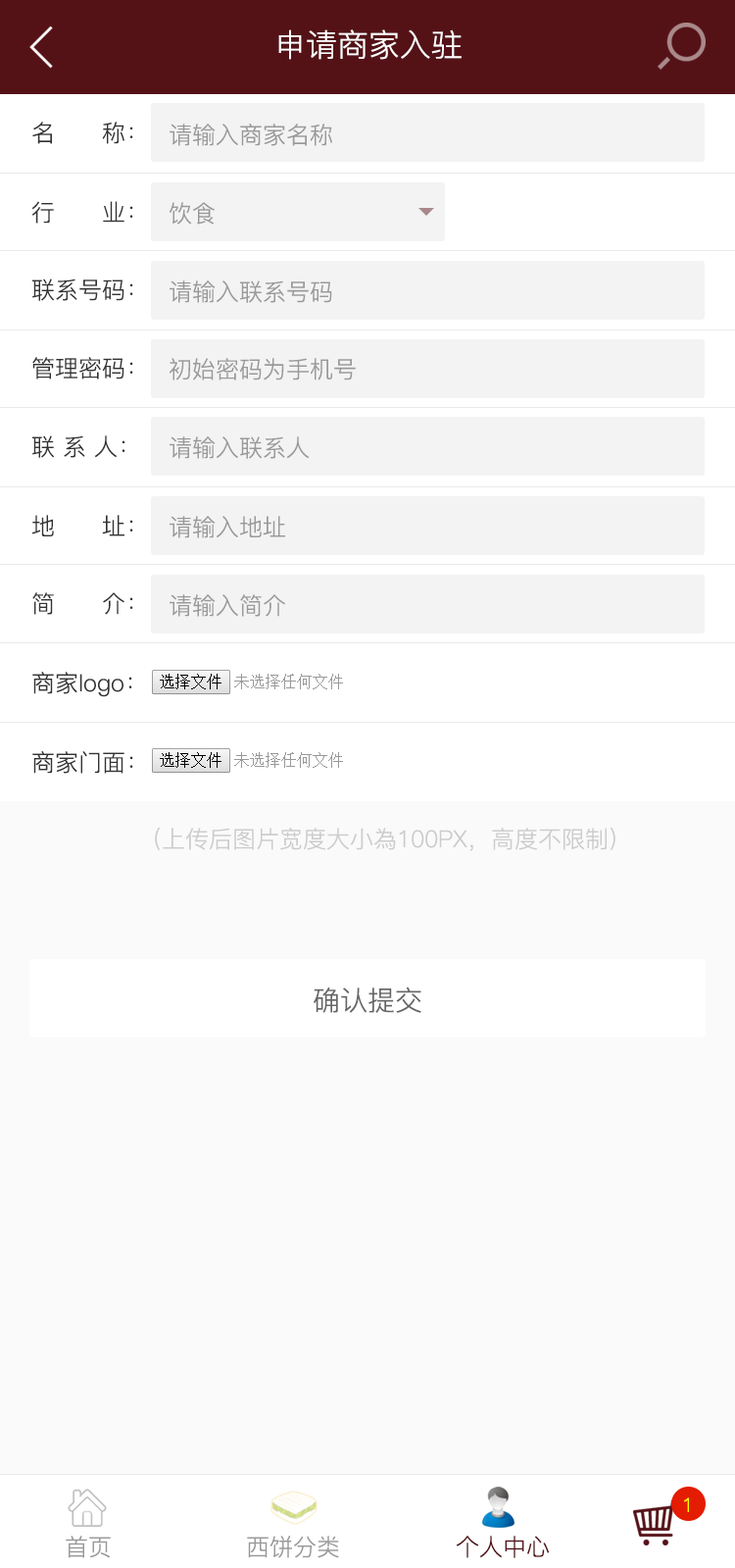
<style>
.page{position:relative;width:735px;height:1568px;background:#fafafa}
.page>*{position:absolute;margin:0}
.t1{font:31.4px "PingFang-SC-Regular";color:#ffffff}
.t2{font:23.5px "PingFang-SC-Regular";color:#333333}
.t3{font:23.5px "PingFang-SC-Regular";color:#999999}
.t4{font:23.5px "PingFang-SC-Regular";color:#cccccc}
.t5{font:27.5px "PingFang-SC-Regular";color:#666666}
.t6{font:19.6px "PingFang-SC-Regular";color:#ffff00}
.t7{font:23.5px "PingFang-SC-Regular";color:#541217}
</style>
<div class="page">
<p class="t1" style="left:278px;top:29px;width:184px;height:31px">申请商家入驻</p>
<p class="t2" style="left:32px;top:122px;width:101px;height:22px">名      称：</p>
<p class="t3" style="left:170px;top:124px;width:162px;height:22px">请输入商家名称</p>
<p class="t2" style="left:32px;top:201px;width:101px;height:23px">行      业：</p>
<p class="t3" style="left:169px;top:202px;width:46px;height:23px">饮食</p>
<p class="t2" style="left:32px;top:278px;width:101px;height:23px">联系号码：</p>
<p class="t3" style="left:170px;top:280px;width:162px;height:23px">请输入联系号码</p>
<p class="t2" style="left:32px;top:357px;width:101px;height:22px">管理密码：</p>
<p class="t3" style="left:169px;top:358px;width:187px;height:22px">初始密码为手机号</p>
<p class="t2" style="left:32px;top:435px;width:94px;height:23px">联 系 人：</p>
<p class="t3" style="left:170px;top:436px;width:140px;height:23px">请输入联系人</p>
<p class="t2" style="left:32px;top:515px;width:101px;height:21px">地      址：</p>
<p class="t3" style="left:170px;top:516px;width:115px;height:22px">请输入地址</p>
<p class="t2" style="left:32px;top:592px;width:101px;height:23px">简      介：</p>
<p class="t3" style="left:170px;top:594px;width:115px;height:23px">请输入简介</p>
<p class="t2" style="left:32px;top:672px;width:100px;height:25px">商家logo：</p>
<p class="t2" style="left:32px;top:751px;width:101px;height:23px">商家门面：</p>
<p class="t4" style="left:155px;top:828px;width:461px;height:23px">（上传后图片宽度大小為100PX，高度不限制）</p>
<p class="t5" style="left:314px;top:987px;width:108px;height:26px">确认提交</p>
<p class="t6" style="left:684px;top:1497px;width:5px;height:15px">1</p>
<p class="t3" style="left:66px;top:1536px;width:45px;height:22px">首页</p>
<p class="t3" style="left:247px;top:1536px;width:92px;height:22px">西饼分类</p>
<p class="t7" style="left:456px;top:1536px;width:94px;height:22px">个人中心</p>
</div>
